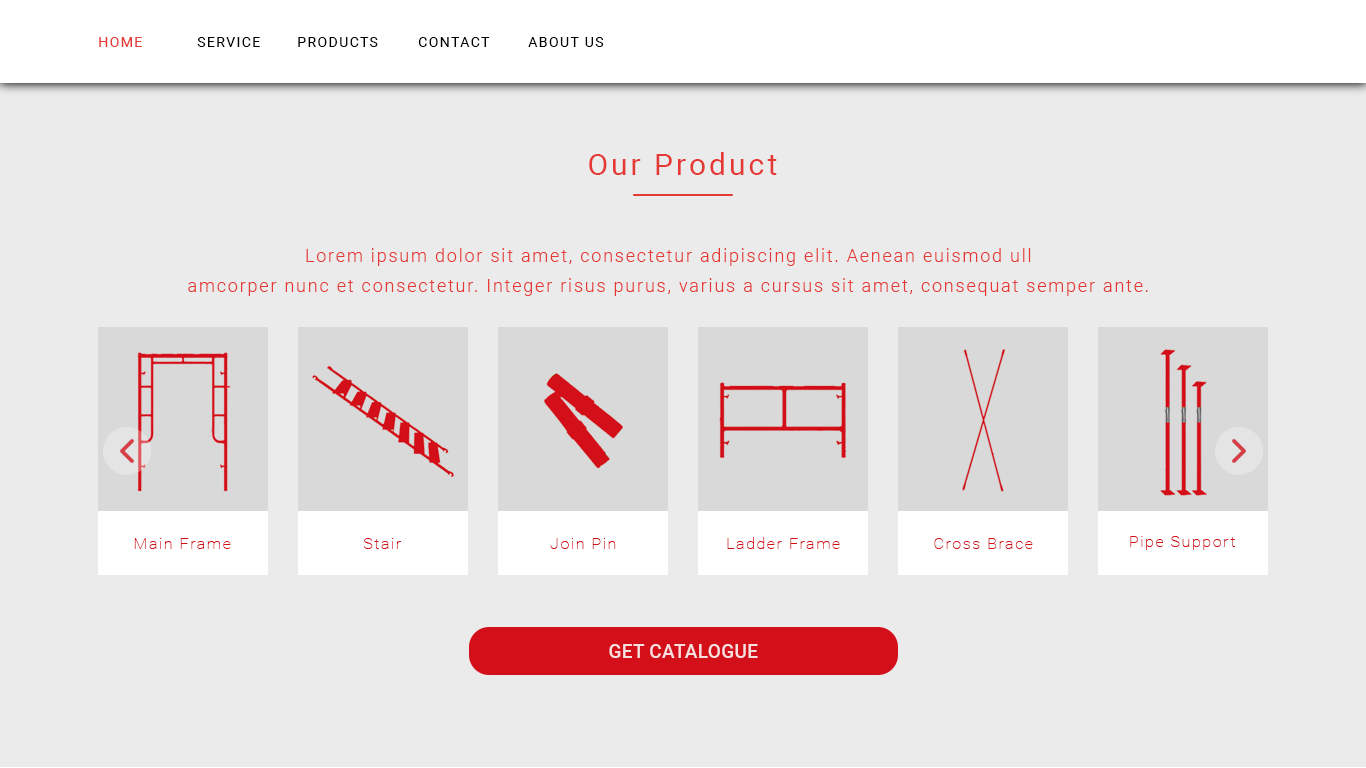
<style>
.page{position:relative;width:1366px;height:768px;background:#ebebeb}
.page>*{position:absolute;margin:0}
.t1{font:14px "Roboto-Regular";letter-spacing:0.1em;color:#e53935}
.t2{font:14px "Roboto-Regular";letter-spacing:0.1em;color:#000000}
.t3{font:30px "Roboto-Regular";letter-spacing:0.1em;color:#e53935}
.t4{font:18px/30px "Roboto-Light";letter-spacing:0.1em;color:#e53935}
.t5{font:16px "Roboto-Thin";letter-spacing:0.1em;color:#d30f19}
.t6{font:19.4px "Roboto-Medium";letter-spacing:0.005em;color:#f7dedf}
</style>
<div class="page">
<p class="t1" style="left:99px;top:37px;width:43px;height:10px">HOME</p>
<p class="t2" style="left:197px;top:37px;width:63px;height:10px">SERVICE</p>
<p class="t2" style="left:298px;top:37px;width:80px;height:10px">PRODUCTS</p>
<p class="t2" style="left:418px;top:37px;width:72px;height:10px">CONTACT</p>
<p class="t2" style="left:528px;top:37px;width:76px;height:10px">ABOUT US</p>
<p class="t3" style="left:589px;top:152px;width:188px;height:23px">Our Product</p>
<p class="t4" style="left:188px;top:248px;width:960px;height:48px;text-align:center">Lorem ipsum dolor sit amet, consectetur adipiscing elit. Aenean euismod ull<br>amcorper nunc et consectetur. Integer risus purus, varius a cursus sit amet, consequat semper ante.</p>
<p class="t5" style="left:134px;top:538px;width:97px;height:11px">Main Frame</p>
<p class="t5" style="left:363px;top:538px;width:38px;height:11px">Stair</p>
<p class="t5" style="left:550px;top:538px;width:66px;height:11px">Join Pin</p>
<p class="t5" style="left:727px;top:537px;width:113px;height:12px">Ladder Frame</p>
<p class="t5" style="left:934px;top:538px;width:99px;height:11px">Cross Brace</p>
<p class="t5" style="left:1130px;top:536px;width:106px;height:14px">Pipe Support</p>
<p class="t6" style="left:609px;top:644px;width:149px;height:14px">GET CATALOGUE</p>
</div>
